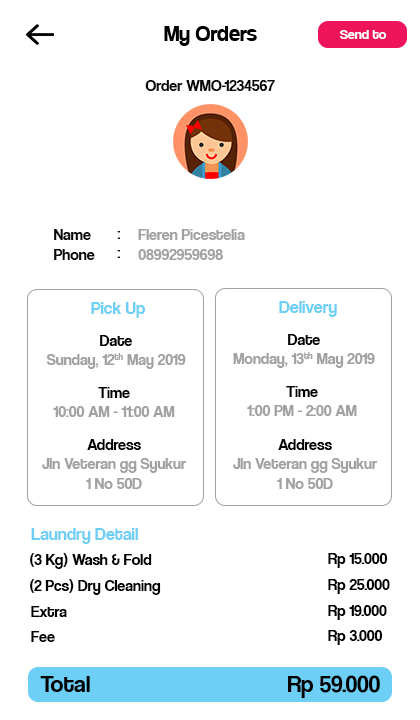
<style>
.page{position:relative;width:420px;height:720px;background:#ffffff}
.page>*{position:absolute;margin:0}
.t1{font:24px "Coolvetica-Regular";color:#000000}
.t2{font:14px "CoolveticaRg-Regular";color:#ffffff}
.t3{font:16px "CoolveticaRg-Regular";color:#0b0a0a}
.t4{font:16px "CoolveticaRg-Regular";color:#090808}
.t5{font:16px "CoolveticaRg-Regular";color:#a1a1a1}
.t6{font:18px "CoolveticaRg-Regular";color:#6dcff6}
.t7{font:16px "CoolveticaRg-Regular";color:#000000}
.t8{font:24px "CoolveticaRg-Regular";color:#000000}
</style>
<div class="page">
<p class="t1" style="left:164px;top:26px;width:93px;height:20px">My Orders</p>
<p class="t2" style="left:340px;top:30px;width:47px;height:9px">Send to</p>
<p class="t3" style="left:145px;top:80px;width:130px;height:11px">Order WMO-1234567</p>
<p class="t3" style="left:54px;top:229px;width:41px;height:31px">Name<br>Phone</p>
<p class="t4" style="left:117px;top:231px;width:4px;height:27px">:<br>:</p>
<p class="t5" style="left:138px;top:229px;width:107px;height:31px">Fleren Picestelia<br>08992959698</p>
<p class="t6" style="left:91px;top:302px;width:54px;height:16px">Pick Up</p>
<p class="t6" style="left:279px;top:301px;width:58px;height:16px">Delivery</p>
<p class="t5" style="left:46px;top:335px;width:140px;height:34px;text-align:center"><span class="t7">Date<br></span>Sunday, 12th May 2019</p>
<p class="t5" style="left:233px;top:334px;width:142px;height:34px;text-align:center"><span class="t7">Date<br></span>Monday, 13th May 2019</p>
<p class="t5" style="left:53px;top:387px;width:122px;height:30px;text-align:center"><span class="t7">Time<br></span>10:00 AM - 11:00 AM</p>
<p class="t5" style="left:247px;top:386px;width:110px;height:30px;text-align:center"><span class="t7">Time<br></span>1:00 PM - 2:00 AM</p>
<p class="t5" style="left:42px;top:439px;width:145px;height:50px;text-align:center"><span class="t7">Address<br></span>Jln Veteran gg Syukur<br>1 No 50D</p>
<p class="t5" style="left:233px;top:439px;width:145px;height:50px;text-align:center"><span class="t7">Address<br></span>Jln Veteran gg Syukur<br>1 No 50D</p>
<p class="t6" style="left:31px;top:528px;width:107px;height:16px">Laundry Detail</p>
<p class="t7" style="left:30px;top:553px;width:122px;height:16px">(3 Kg) Wash &amp; Fold</p>
<p class="t7" style="left:328px;top:553px;width:60px;height:15px">Rp 15.000</p>
<p class="t7" style="left:30px;top:579px;width:131px;height:16px">(2 Pcs) Dry Cleaning</p>
<p class="t7" style="left:328px;top:579px;width:62px;height:15px">Rp 25.000</p>
<p class="t7" style="left:31px;top:606px;width:36px;height:11px">Extra</p>
<p class="t7" style="left:328px;top:605px;width:59px;height:15px">Rp 19.000</p>
<p class="t7" style="left:328px;top:630px;width:55px;height:15px">Rp 3.000</p>
<p class="t7" style="left:31px;top:631px;width:24px;height:11px">Fee</p>
<p class="t8" style="left:40px;top:676px;width:50px;height:16px">Total</p>
<p class="t8" style="left:288px;top:675px;width:92px;height:23px">Rp 59.000</p>
</div>
